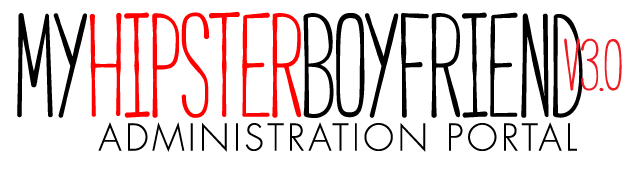
<style>
.page{position:relative;width:641px;height:173px;background:#ffffff}
.page>*{position:absolute;margin:0}
.t1{font:144px "Cabana-Regular";letter-spacing:-0.01em;color:#000000}
.t2{font:144px "Cabana-Regular";letter-spacing:-0.01em;color:#ff0000}
.t3{font:72px "Cabana-Regular";letter-spacing:-0.01em;color:#ed1c24}
.t4{font:36px "FuturaStd-Light";letter-spacing:0.1em;color:#000000}
</style>
<div class="page">
<p class="t1" style="left:17px;top:11px;width:566px;height:107px">my<span class="t2">hipster</span>boyfriend</p>
<p class="t3" style="left:564px;top:38px;width:58px;height:53px">v3.0</p>
<p class="t4" style="left:98px;top:122px;width:479px;height:30px">ADMINISTRATION PORTAL</p>
</div>
